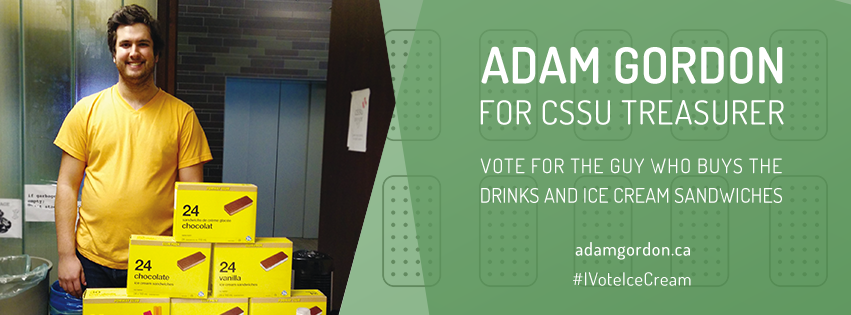
<style>
.page{position:relative;width:851px;height:315px}
.page>*{position:absolute;margin:0}
.t1{font:50px "Dosis-SemiBold";letter-spacing:0.01em;color:#ffffff}
.t2{font:33.3px "Dosis-Regular";letter-spacing:0.028em;color:#ffffff}
.t3{font:20.3px "Dosis-Regular";letter-spacing:0.044em;color:#ffffff}
.t4{font:20.3px "Dosis-Regular";letter-spacing:0.009em;color:#ffffff}
.t5{font:18px "Dosis-Medium";letter-spacing:0.04em;color:#ffffff}
.t6{font:18px "Dosis-Regular";letter-spacing:0.04em;color:#ffffff}
</style>
<div class="page">
<p class="t1" style="left:481px;top:46px;width:302px;height:38px">ADAM GORDON</p>
<p class="t2" style="left:480px;top:100px;width:304px;height:25px">FOR CSSU TREASURER</p>
<p class="t3" style="left:480px;top:158px;width:302px;height:16px">VOTE FOR THE GUY WHO BUYS THE</p>
<p class="t4" style="left:481px;top:188px;width:301px;height:15px">DRINKS AND ICE CREAM SANDWICHES</p>
<p class="t5" style="left:575px;top:242px;width:115px;height:18px">adamgordon.ca</p>
<p class="t6" style="left:573px;top:272px;width:118px;height:14px">#IVoteIceCream</p>
</div>
